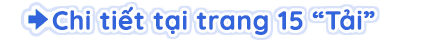
<style>
.page{position:relative;width:448px;height:43px;background:#ffffff}
.page>*{position:absolute;margin:0}
.t1{font:26px "Quicksand-Bold";color:#3264dc;font-weight:bold}
</style>
<div class="page">
<p class="t1" style="left:52px;top:6px;width:323px;height:29px">Chi tiết tại trang 15 “Tải”</p>
</div>
